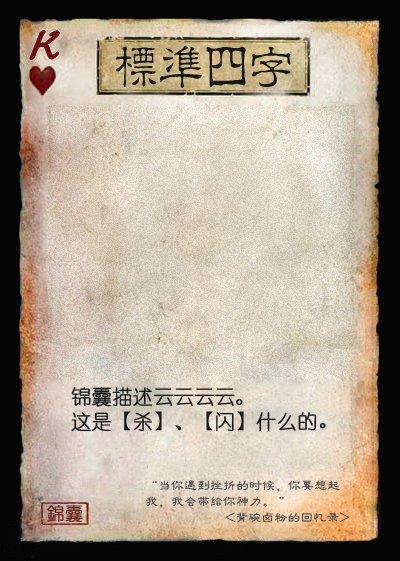
<style>
.page{position:relative;width:400px;height:561px}
.page>*{position:absolute;margin:0}
.t1{font:50px "Jxixinkai";color:#661213;font-weight:bold;font-style:italic}
.t2{font:50px "¾­µä·±½ÇÁ¥ Regular";letter-spacing:-0.1em;color:#161616}
.t3{font:20px "YouYuan";color:#161616;font-weight:bold}
.t4{font:20px "DFPWaWaW5";color:#161616;font-weight:bold}
.t5{font:13px "FZLBJW--GB1-0";color:#464646}
.t6{font:18px "YouYuan";color:#662219;font-weight:bold}
</style>
<div class="page">
<p class="t1" style="left:30px;top:30px;width:30px;height:30px">K</p>
<p class="t2" style="left:115px;top:46px;width:176px;height:42px">标准四字</p>
<p class="t3" style="left:71px;top:386px;width:172px;height:21px">锦囊描述云云云云。</p>
<p class="t3" style="left:71px;top:411px;width:255px;height:21px">这是<span class="t4">【</span>杀<span class="t4">】</span>、<span class="t4">【</span>闪<span class="t4">】</span>什么的<span class="t4">。</span></p>
<p class="t5" style="left:152px;top:480px;width:188px;height:12px">“当你遇到挫折的时候，你要想起</p>
<p class="t5" style="left:146px;top:496px;width:138px;height:12px">我，我会带给你神力。 ”</p>
<p class="t6" style="left:47px;top:504px;width:36px;height:18px">錦囊</p>
<p class="t5" style="left:225px;top:512px;width:125px;height:11px">&lt;背碗卤粉的回忆录&gt;</p>
</div>
